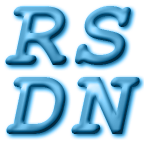
<style>
.page{position:relative;width:144px;height:144px;background:#ffffff}
.page>*{position:absolute;margin:0}
.t1{font:98.6px "CourierNewPS-BoldItalicMT"}
</style>
<div class="page">
<p class="t1" style="left:5px;top:6px;width:62px;height:59px">R</p>
<p class="t1" style="left:75px;top:6px;width:56px;height:59px">S</p>
<p class="t1" style="left:6px;top:77px;width:60px;height:57px">D</p>
<p class="t1" style="left:71px;top:77px;width:69px;height:57px">N</p>
</div>
